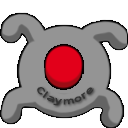
<style>
.page{position:relative;width:128px;height:128px;background:#ffffff}
.page>*{position:absolute;margin:0}
.t1{font:10px "Arial-BoldMT";color:#343434}
</style>
<div class="page">
<p class="t1" style="left:37px;top:87px;width:57px;height:19px;text-align:center">Claymore</p>
</div>
